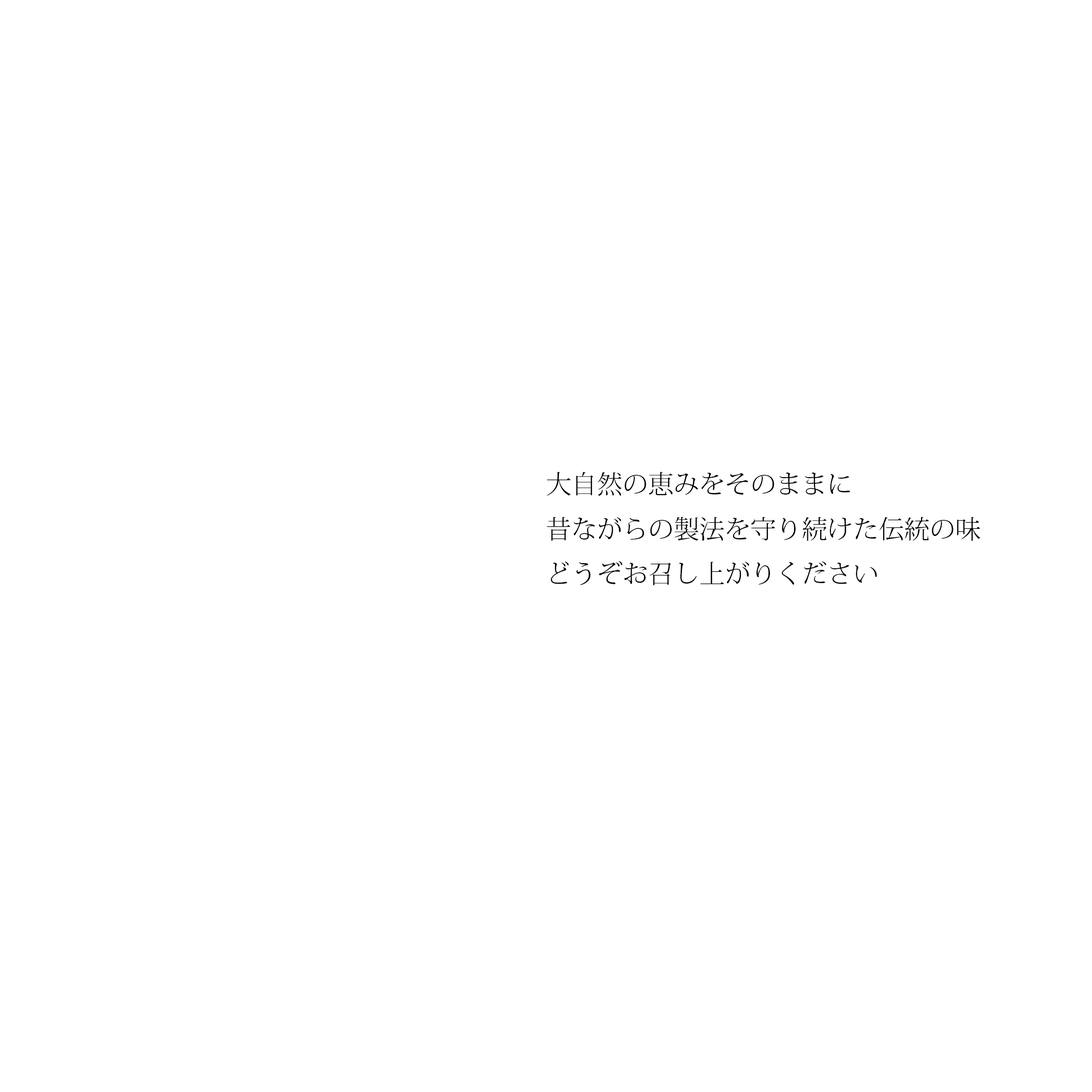
<style>
.page{position:relative;width:1092px;height:1092px;background:#ffffff}
.page>*{position:absolute;margin:0}
.t1{font:25.6px "KozMinPr6N-Light";color:#000000}
</style>
<div class="page">
<p class="t1" style="left:547px;top:472px;width:433px;height:114px">大自然の恵みをそのままに<br>昔ながらの製法を守り続けた伝統の味<br>どうぞお召し上がりください</p>
</div>
